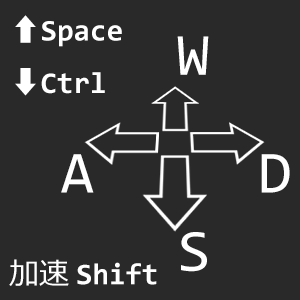
<style>
.page{position:relative;width:300px;height:300px;background:#292929}
.page>*{position:absolute;margin:0}
.t1{font:30px "Consolas-Bold";color:#ffffff}
.t2{font:30px "KozGoPr6N-Regular";color:#ffffff}
.t3{font:60px "Consolas";color:#ffffff}
.t4{font:30px "Meiryo";color:#ffffff}
</style>
<div class="page">
<p class="t1" style="left:15px;top:15px;width:107px;height:81px"><span class="t2">⬅</span>Space<br><span class="t2">➡</span>Ctrl</p>
<p class="t3" style="left:177px;top:36px;width:32px;height:39px">W</p>
<p class="t3" style="left:61px;top:154px;width:229px;height:39px">A     D</p>
<p class="t3" style="left:181px;top:232px;width:26px;height:40px">S</p>
<p class="t1" style="left:9px;top:259px;width:148px;height:27px"><span class="t4">加速 </span>Shift</p>
</div>
